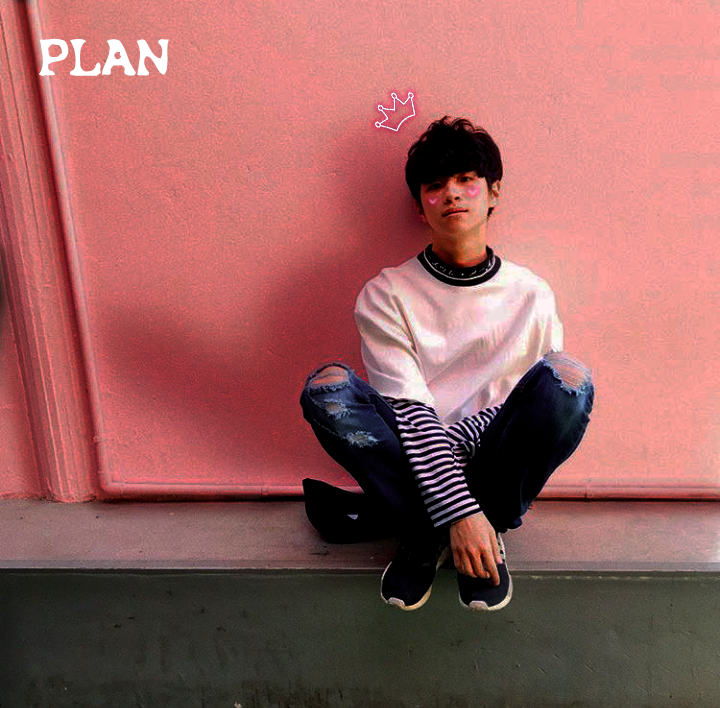
<style>
.page{position:relative;width:720px;height:708px}
.page>*{position:absolute;margin:0}
.t1{font:48px "X-Files-Regular";color:#ffffff}
</style>
<div class="page">
<p class="t1" style="left:39px;top:38px;width:130px;height:38px">PLAN</p>
</div>
